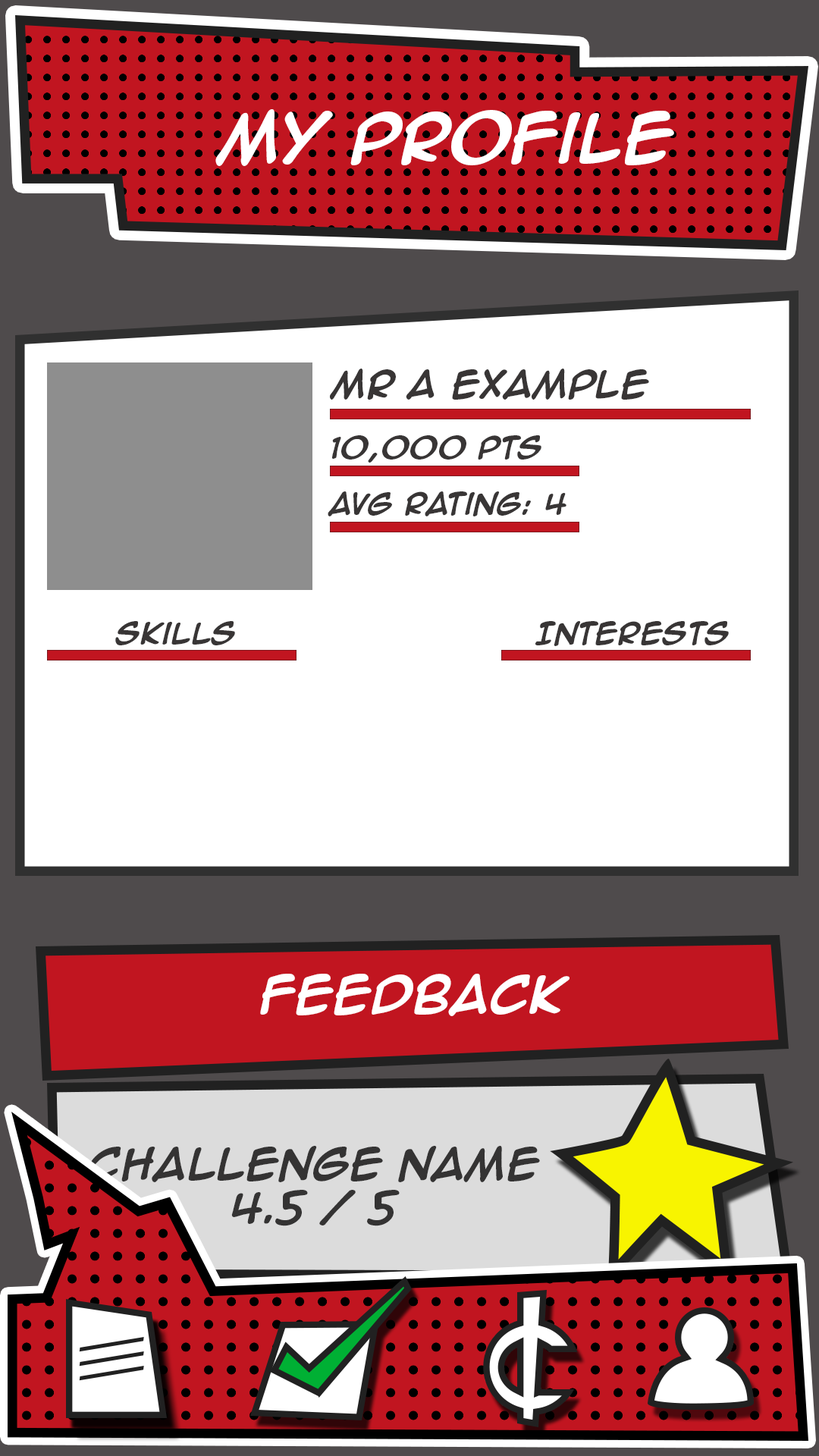
<style>
.page{position:relative;width:819px;height:1456px;background:#ffffff}
.page>*{position:absolute;margin:0}
.t1{font:57.1px "AnimeAce2.0BB-Bold";color:#ffffff}
.t2{font:31.6px "AnimeAce2.0BB-Bold";color:#383535}
.t3{font:25.3px "AnimeAce2.0BB-Bold";color:#383535}
.t4{font:43.4px "AnimeAce2.0BB-Bold";color:#ffffff}
.t5{font:37px "AnimeAce2.0BB-Bold";color:#343333}
</style>
<div class="page">
<p class="t1" style="left:215px;top:109px;width:459px;height:57px">My Profile</p>
<p class="t2" style="left:330px;top:369px;width:319px;height:31px">Mr A Example</p>
<p class="t3" style="left:332px;top:435px;width:209px;height:28px">10,000 pts</p>
<p class="t3" style="left:328px;top:491px;width:238px;height:25px">AVG Rating: 4</p>
<p class="t3" style="left:115px;top:621px;width:120px;height:24px">Skills</p>
<p class="t3" style="left:535px;top:621px;width:194px;height:25px">Interests</p>
<p class="t4" style="left:260px;top:974px;width:310px;height:42px">Feedback</p>
<p class="t5" style="left:87px;top:1146px;width:453px;height:80px;text-align:center">Challenge Name <br>4.5 / 5</p>
</div>
